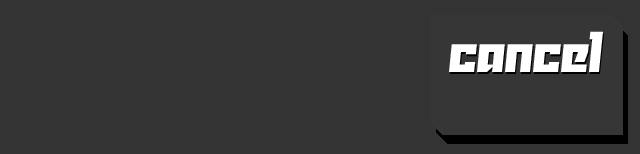
<style>
.page{position:relative;width:640px;height:154px;background:#333333}
.page>*{position:absolute;margin:0}
.t1{font:51.6px "Yukarimobile";color:#ffffff}
</style>
<div class="page">
<p class="t1" style="left:449px;top:31px;width:154px;height:41px">cancel</p>
</div>
